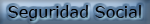
<style>
.page{position:relative;width:150px;height:24px}
.page>*{position:absolute;margin:0}
.t1{font:16px "Verdana";color:#000000}
</style>
<div class="page">
<p class="t1" style="left:8px;top:5px;width:133px;height:16px">Seguridad Social</p>
</div>
